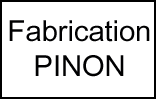
<style>
.page{position:relative;width:156px;height:99px;background:#ffffff}
.page>*{position:absolute;margin:0}
.t1{font:29.1px "ArialUnicodeMS";color:#000001}
</style>
<div class="page">
<p class="t1" style="left:9px;top:20px;width:141px;height:57px;text-align:center">Fabrication<br>PINON</p>
</div>
